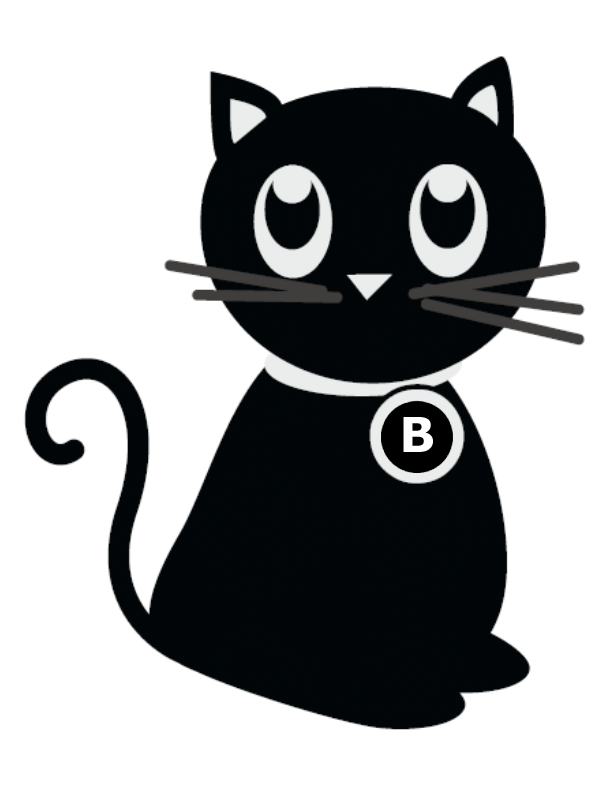
<style>
.page{position:relative;width:611px;height:800px;background:#ffffff}
.page>*{position:absolute;margin:0}
.t1{font:48px "Verdana-Bold";letter-spacing:0.01em;color:#ffffff}
</style>
<div class="page">
<p class="t1" style="left:403px;top:417px;width:30px;height:35px">B</p>
</div>
